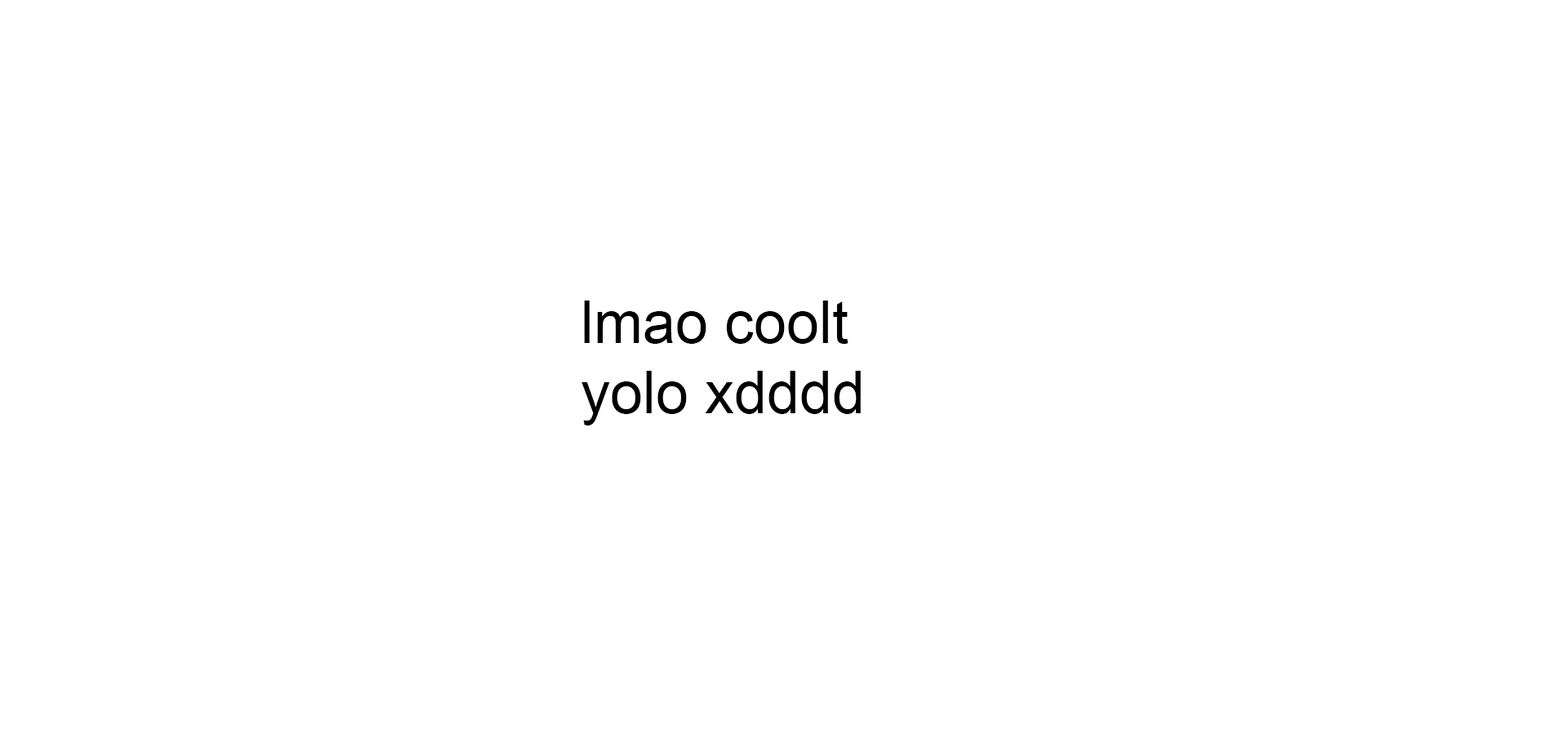
<style>
.page{position:relative;width:1568px;height:735px;background:#ffffff}
.page>*{position:absolute;margin:0}
.t1{font:58.8px "ArialMT";color:#000000}
</style>
<div class="page">
<p class="t1" style="left:581px;top:301px;width:280px;height:124px">lmao coolt<br>yolo xdddd</p>
</div>
